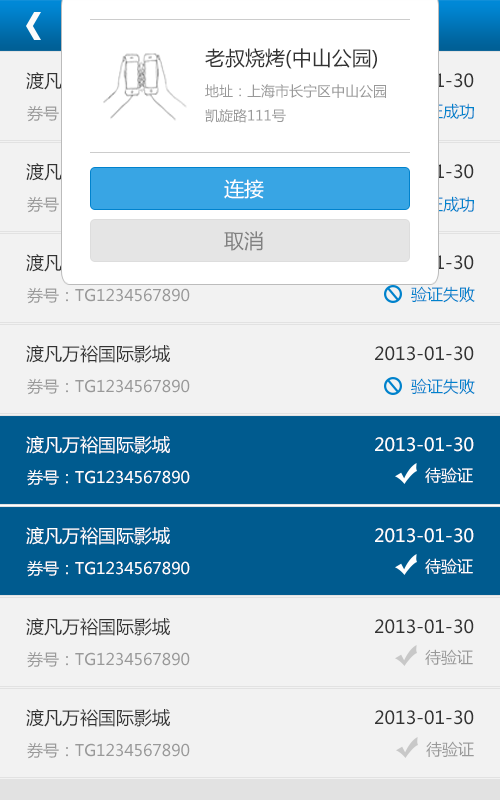
<style>
.page{position:relative;width:500px;height:800px;background:#f2f2f2}
.page>*{position:absolute;margin:0}
.t1{font:20px "MicrosoftYaHei";color:#333333}
.t2{font:18px "MicrosoftYaHei"}
.t3{font:14px "MicrosoftYaHei";color:#999999}
.t4{font:16px "MicrosoftYaHei";color:#ffffff}
.t5{font:16px "MicrosoftYaHei"}
.t6{font:20px "MicrosoftYaHei";color:#ffffff}
.t7{font:20px "MicrosoftYaHei";color:#818181}
.t8{font:16px "MicrosoftYaHei";color:#999999}
.t9{font:16px "MicrosoftYaHei";color:#0082cc}
.t10{font:18px "MicrosoftYaHei";color:#333333}
.t11{font:18px "MicrosoftYaHei";color:#ffffff}
</style>
<div class="page">
<p class="t1" style="left:205px;top:48px;width:172px;height:21px">老叔烧烤(中山公园)</p>
<p class="t2" style="left:26px;top:72px;width:144px;height:18px">渡凡万裕国际影城</p>
<p class="t2" style="left:375px;top:73px;width:99px;height:15px">2013-01-30</p>
<p class="t3" style="left:205px;top:84px;width:181px;height:39px">地址：上海市长宁区中山公园<br>凯旋路111号</p>
<p class="t4" style="left:27px;top:105px;width:163px;height:17px">券号：TG1234567890</p>
<p class="t5" style="left:411px;top:103px;width:63px;height:16px">验证成功</p>
<p class="t2" style="left:26px;top:163px;width:144px;height:18px">渡凡万裕国际影城</p>
<p class="t2" style="left:375px;top:164px;width:99px;height:15px">2013-01-30</p>
<p class="t6" style="left:224px;top:179px;width:40px;height:20px">连接</p>
<p class="t5" style="left:27px;top:196px;width:163px;height:17px">券号：TG1234567890</p>
<p class="t5" style="left:411px;top:196px;width:63px;height:16px">验证成功</p>
<p class="t7" style="left:224px;top:231px;width:39px;height:20px">取消</p>
<p class="t2" style="left:26px;top:254px;width:144px;height:18px">渡凡万裕国际影城</p>
<p class="t2" style="left:375px;top:255px;width:99px;height:15px">2013-01-30</p>
<p class="t8" style="left:27px;top:287px;width:163px;height:17px">券号：TG1234567890</p>
<p class="t9" style="left:411px;top:286px;width:64px;height:17px">验证失败</p>
<p class="t10" style="left:26px;top:345px;width:144px;height:18px">渡凡万裕国际影城</p>
<p class="t10" style="left:375px;top:346px;width:99px;height:15px">2013-01-30</p>
<p class="t8" style="left:27px;top:378px;width:163px;height:17px">券号：TG1234567890</p>
<p class="t9" style="left:411px;top:378px;width:64px;height:17px">验证失败</p>
<p class="t11" style="left:26px;top:436px;width:144px;height:18px">渡凡万裕国际影城</p>
<p class="t11" style="left:375px;top:437px;width:99px;height:15px">2013-01-30</p>
<p class="t4" style="left:27px;top:469px;width:163px;height:17px">券号：TG1234567890</p>
<p class="t4" style="left:425px;top:467px;width:48px;height:16px">待验证</p>
<p class="t11" style="left:26px;top:527px;width:144px;height:18px">渡凡万裕国际影城</p>
<p class="t11" style="left:375px;top:528px;width:99px;height:15px">2013-01-30</p>
<p class="t4" style="left:425px;top:558px;width:48px;height:16px">待验证</p>
<p class="t4" style="left:27px;top:560px;width:163px;height:17px">券号：TG1234567890</p>
<p class="t10" style="left:26px;top:618px;width:144px;height:18px">渡凡万裕国际影城</p>
<p class="t10" style="left:375px;top:619px;width:99px;height:15px">2013-01-30</p>
<p class="t8" style="left:27px;top:651px;width:163px;height:17px">券号：TG1234567890</p>
<p class="t8" style="left:425px;top:649px;width:48px;height:16px">待验证</p>
<p class="t10" style="left:26px;top:709px;width:144px;height:18px">渡凡万裕国际影城</p>
<p class="t10" style="left:375px;top:710px;width:99px;height:15px">2013-01-30</p>
<p class="t8" style="left:27px;top:742px;width:163px;height:17px">券号：TG1234567890</p>
<p class="t8" style="left:426px;top:741px;width:48px;height:16px">待验证</p>
</div>
